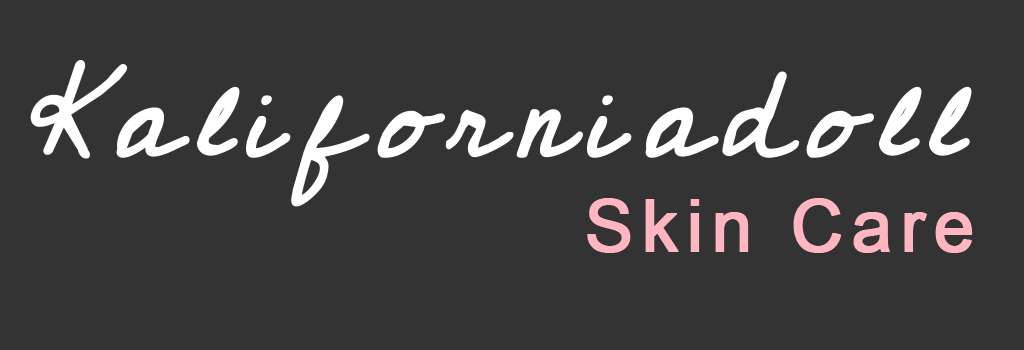
<style>
.page{position:relative;width:1024px;height:350px;background:#333333}
.page>*{position:absolute;margin:0}
.t1{font:120px "Cedarville-Cursive";letter-spacing:0.1em;color:#ffffff;font-weight:bold;font-style:italic}
.t2{font:72px "ArialMT";letter-spacing:0.1em;color:#ffb6c1;font-weight:bold}
</style>
<div class="page">
<p class="t1" style="left:30px;top:60px;width:942px;height:147px">Kaliforniadoll</p>
<p class="t2" style="left:587px;top:198px;width:386px;height:55px">Skin Care</p>
</div>
